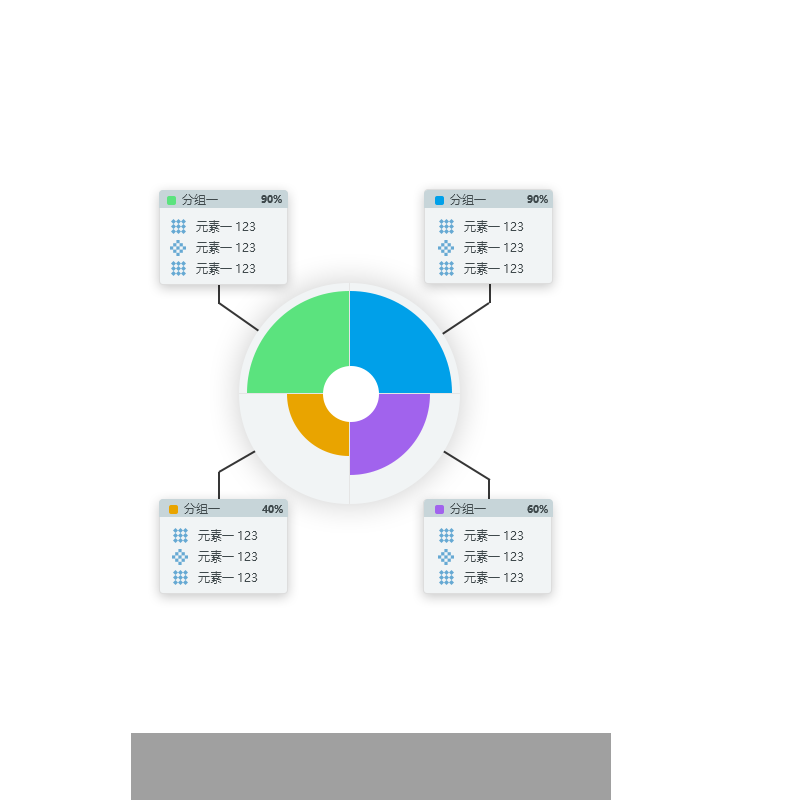
<style>
.page{position:relative;width:800px;height:800px;background:#ffffff}
.page>*{position:absolute;margin:0}
.t1{font:12px "MicrosoftYaHei";color:#3f494c}
.t2{font:10px "MicrosoftYaHei-Bold";color:#3f494c}
</style>
<div class="page">
<p class="t1" style="left:182px;top:194px;width:36px;height:11px">分组一</p>
<p class="t2" style="left:261px;top:195px;width:21px;height:8px">90%</p>
<p class="t1" style="left:450px;top:194px;width:36px;height:11px">分组一</p>
<p class="t2" style="left:527px;top:195px;width:21px;height:8px">90%</p>
<p class="t1" style="left:196px;top:220px;width:60px;height:55px">元素一123<br>元素一123<br>元素一123</p>
<p class="t1" style="left:464px;top:220px;width:60px;height:55px">元素一123<br>元素一123<br>元素一123</p>
<p class="t1" style="left:184px;top:503px;width:36px;height:11px">分组一</p>
<p class="t2" style="left:262px;top:505px;width:21px;height:8px">40%</p>
<p class="t1" style="left:450px;top:503px;width:36px;height:11px">分组一</p>
<p class="t2" style="left:527px;top:505px;width:21px;height:8px">60%</p>
<p class="t1" style="left:198px;top:529px;width:60px;height:55px">元素一123<br>元素一123<br>元素一123</p>
<p class="t1" style="left:464px;top:529px;width:60px;height:55px">元素一123<br>元素一123<br>元素一123</p>
</div>
